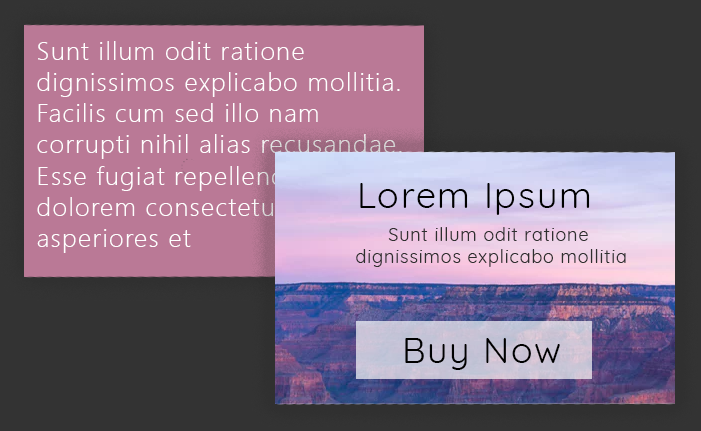
<style>
.page{position:relative;width:701px;height:431px;background:#333333}
.page>*{position:absolute;margin:0}
.t1{font:26px "SegoeUI-Light";letter-spacing:0.05em;color:#ffffff}
.t2{font:36px "Quicksand-Regular";letter-spacing:0.05em;color:#000000}
.t3{font:18px "Quicksand-Regular";letter-spacing:0.05em;color:#2f2f2f}
</style>
<div class="page">
<p class="t1" style="left:37px;top:41px;width:365px;height:212px">Sunt illum odit ratione dignissimos explicabo mollitia. Facilis cum sed illo nam corrupti nihil alias recusandae. Esse fugiat repellendus dolorem consectetur asperiores et</p>
<p class="t2" style="left:360px;top:183px;width:230px;height:32px">Lorem Ipsum</p>
<p class="t3" style="left:356px;top:227px;width:270px;height:40px;text-align:center">Sunt illum odit ratione <br>dignissimos explicabo mollitia</p>
<p class="t2" style="left:405px;top:338px;width:155px;height:32px">Buy Now</p>
</div>
